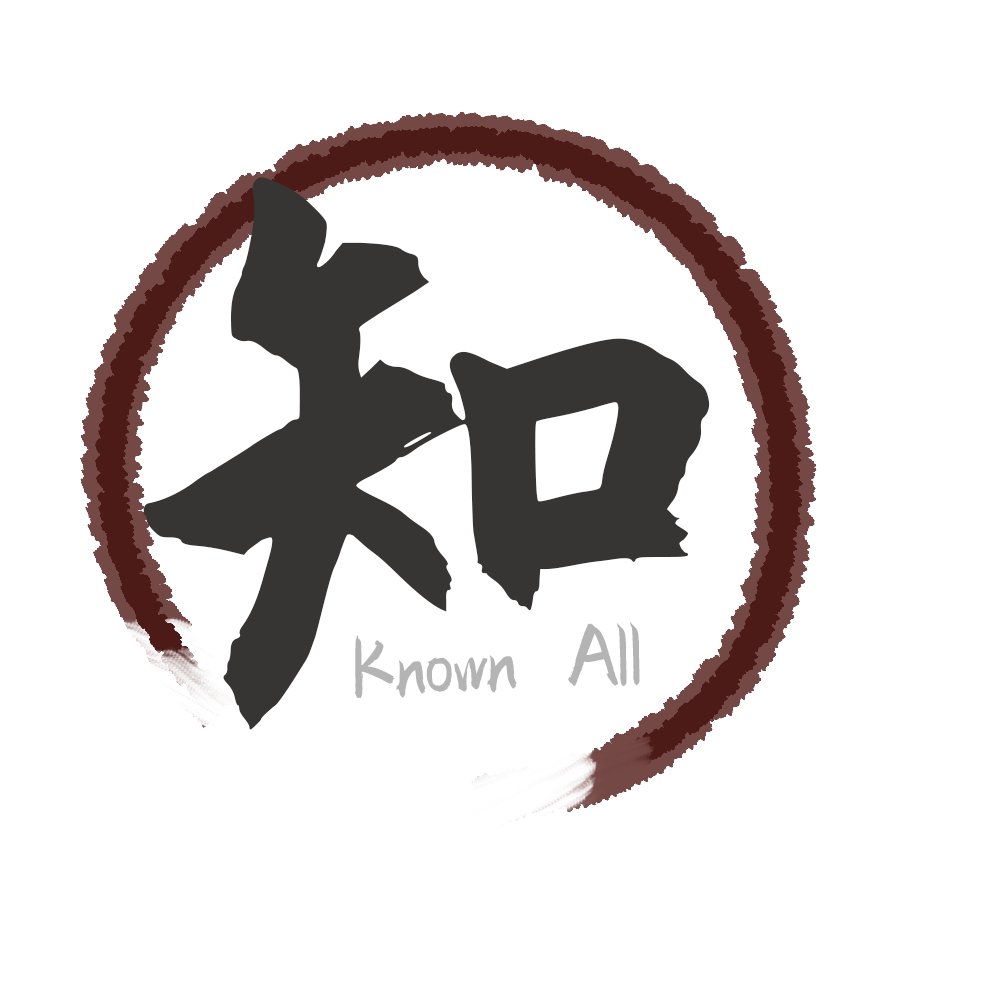
<style>
.page{position:relative;width:1000px;height:1000px;background:#ffffff}
.page>*{position:absolute;margin:0}
.t1{font:673.9px "PangMenZhengDao-Cu";color:#373434}
.t2{font:100px "PangMenZhengDao-Cu";color:#b4b4b4}
</style>
<div class="page">
<p class="t1" style="left:143px;top:177px;width:567px;height:553px">知</p>
<p class="t2" style="left:354px;top:622px;width:286px;height:77px;rotate:-3deg">Known All</p>
</div>
